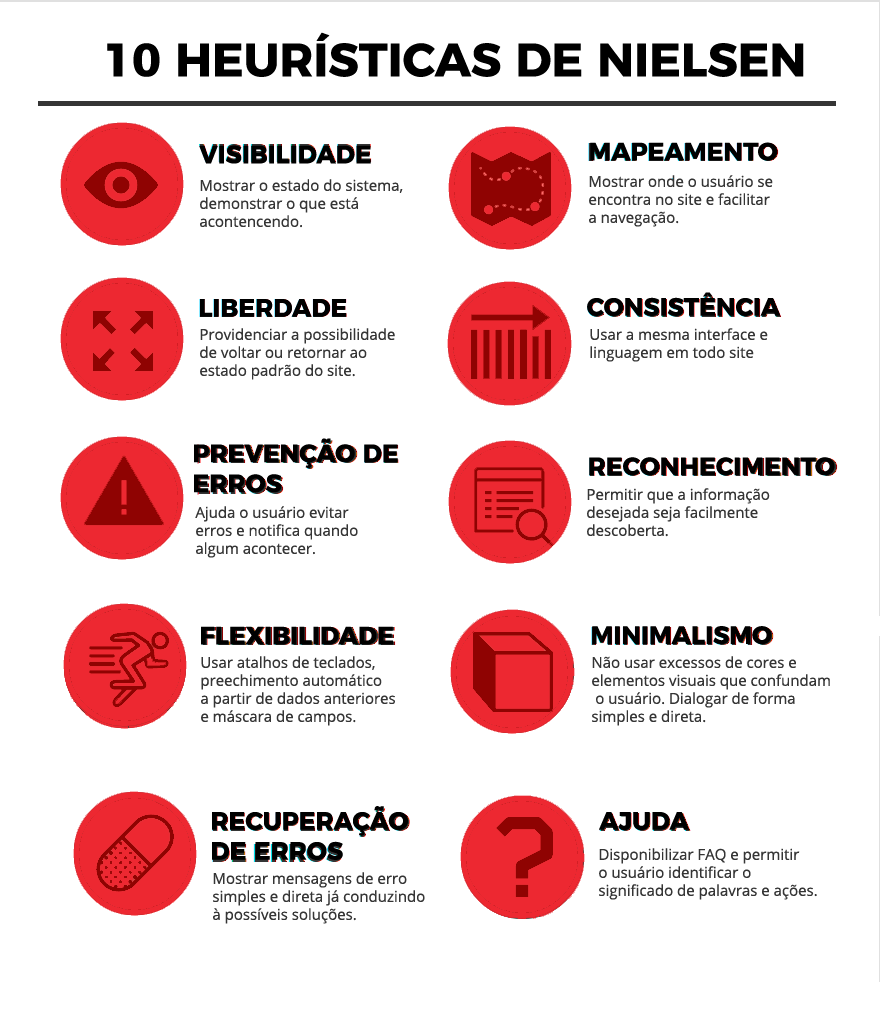
<style>
.page{position:relative;width:880px;height:1034px;background:#ffffff}
.page>*{position:absolute;margin:0}
.t1{font:47px "Montserrat-Bold";color:#000000}
.t2{font:25px "Montserrat-Bold";color:#000000}
.t3{font:15px/18px "OpenSans";color:#353535}
</style>
<div class="page">
<p class="t1" style="left:107px;top:32px;width:697px;height:45px">10 HEURÍSTICAS DE NIELSEN</p>
<p class="t2" style="left:199px;top:145px;width:172px;height:19px">VISIBILIDADE</p>
<p class="t2" style="left:590px;top:142px;width:188px;height:19px">MAPEAMENTO</p>
<p class="t3" style="left:200px;top:179px;width:203px;height:49px">Mostrar o estado do sistema,<br>demonstrar o que está<br>acontencendo.</p>
<p class="t3" style="left:589px;top:175px;width:184px;height:52px">Mostrar onde o usuário se <br>encontra no site e facilitar <br>a navegação.</p>
<p class="t2" style="left:587px;top:292px;width:194px;height:24px">CONSISTÊNCIA</p>
<p class="t2" style="left:200px;top:299px;width:147px;height:18px">LIBERDADE</p>
<p class="t3" style="left:200px;top:328px;width:195px;height:52px">Providenciar a possibilidade <br>de voltar ou retornar ao <br>estado padrão do site.</p>
<p class="t3" style="left:590px;top:328px;width:178px;height:34px">Usar a mesma interface e <br>linguagem em todo site</p>
<p class="t2" style="left:194px;top:438px;width:204px;height:55px">PREVENÇÃO DE<br>ERROS</p>
<p class="t2" style="left:589px;top:457px;width:246px;height:19px">RECONHECIMENTO</p>
<p class="t3" style="left:587px;top:488px;width:183px;height:49px">Permitir que a informação <br>desejada seja facilmente <br>descoberta.</p>
<p class="t3" style="left:195px;top:506px;width:163px;height:52px">Ajuda o usuário evitar <br>erros e notifica quando <br>algum acontecer.</p>
<p class="t2" style="left:201px;top:626px;width:192px;height:19px">FLEXIBILIDADE</p>
<p class="t2" style="left:592px;top:626px;width:180px;height:19px">MINIMALISMO</p>
<p class="t3" style="left:201px;top:656px;width:194px;height:70px">Usar atalhos de teclados, <br>preechimento automático <br>a partir de dados anteriores <br>e máscara de campos.</p>
<p class="t3" style="left:592px;top:656px;width:238px;height:70px">Não usar excessos de cores e <br>elementos visuais que confundam<br> o usuário. Dialogar de forma <br>simples e direta.</p>
<p class="t2" style="left:212px;top:806px;width:196px;height:54px">RECUPERAÇÃO<br>DE ERROS</p>
<p class="t2" style="left:599px;top:812px;width:91px;height:18px">AJUDA</p>
<p class="t3" style="left:599px;top:848px;width:218px;height:52px">Disponibilizar FAQ e permitir <br>o usuário identificar o <br>significado de palavras e ações.</p>
<p class="t3" style="left:213px;top:872px;width:212px;height:52px">Mostrar mensagens de erro <br>simples e direta já conduzindo <br>à possíveis soluções.</p>
</div>
